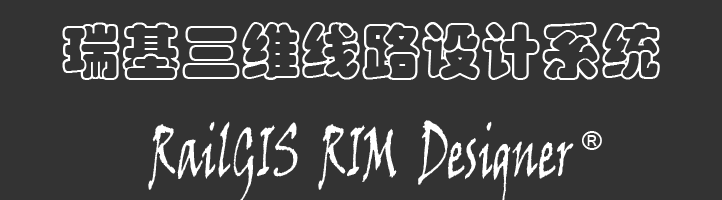
<style>
.page{position:relative;width:722px;height:200px;background:#333333}
.page>*{position:absolute;margin:0}
.t1{font:60px "STCaiyun";color:#ffffff}
.t2{font:30px "Latha";color:#ffffff}
</style>
<div class="page">
<p class="t1" style="left:62px;top:22px;width:598px;height:58px">瑞基三维线路设计系统</p>
<p class="t2" style="left:582px;top:131px;width:20px;height:19px">®</p>
</div>
